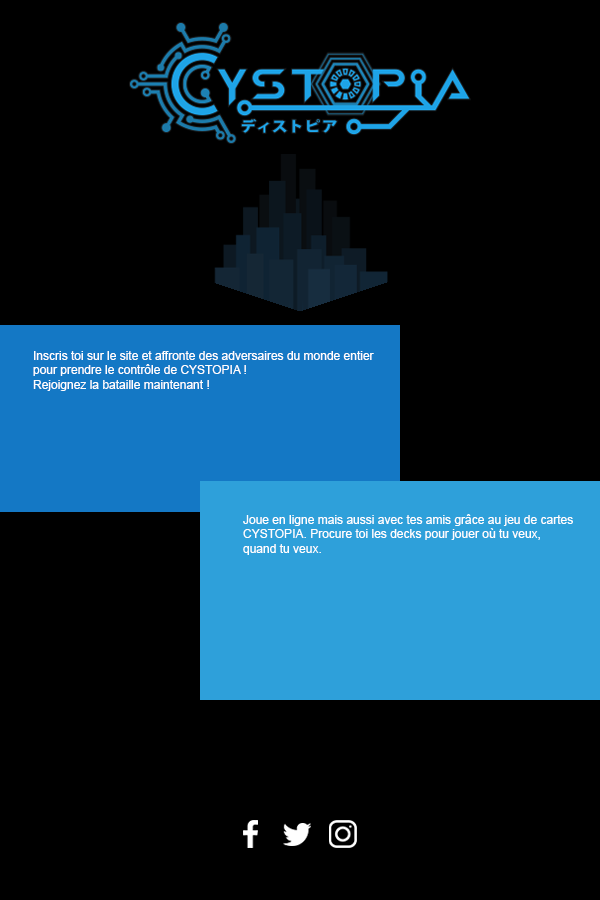
<style>
.page{position:relative;width:600px;height:900px;background:#000000}
.page>*{position:absolute;margin:0}
.t1{font:12px "ArialMT";color:#ffffff}
</style>
<div class="page">
<p class="t1" style="left:33px;top:351px;width:341px;height:40px">Inscris toi sur le site et affronte des adversaires du monde entier<br>pour prendre le contrôle de CYSTOPIA !<br>Rejoignez la bataille maintenant !</p>
<p class="t1" style="left:243px;top:514px;width:330px;height:41px">Joue en ligne mais aussi avec tes amis grâce au jeu de cartes<br>CYSTOPIA. Procure toi les decks pour jouer où tu veux, <br>quand tu veux.</p>
</div>
